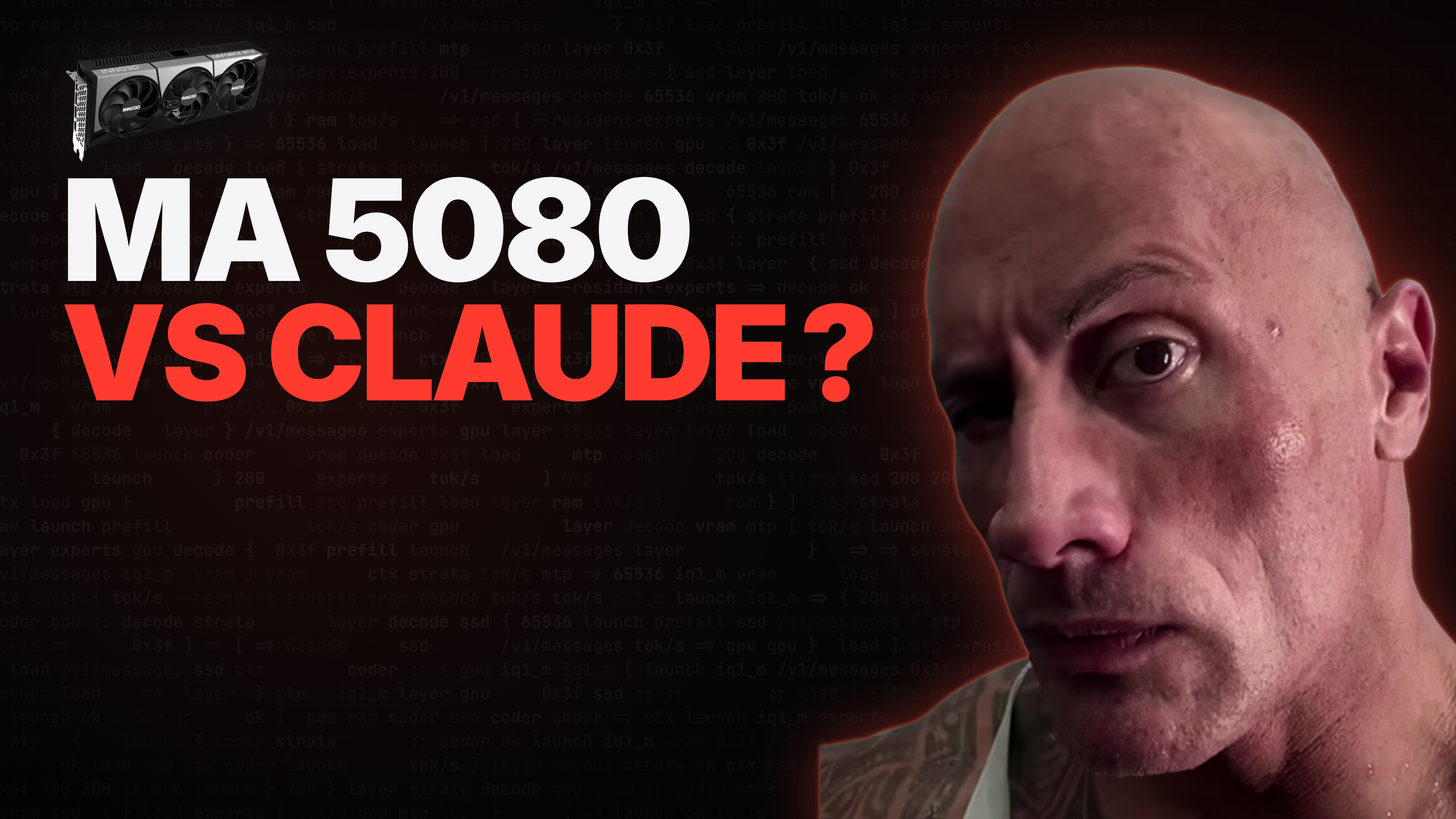
<style>
.page{position:relative;width:1456px;height:819px}
.page>*{position:absolute;margin:0}
.t1{font:141px "Inter-Black";letter-spacing:-0.035em;color:#f5f5f7}
.t2{font:131.9px "Inter-Black";letter-spacing:-0.035em;color:#ff3b30}
</style>
<div class="page">
<p class="t1" style="left:67px;top:177px;width:623px;height:106px">MA 5080</p>
<p class="t2" style="left:64px;top:303px;width:809px;height:100px">VS CLAUDE ?</p>
</div>
